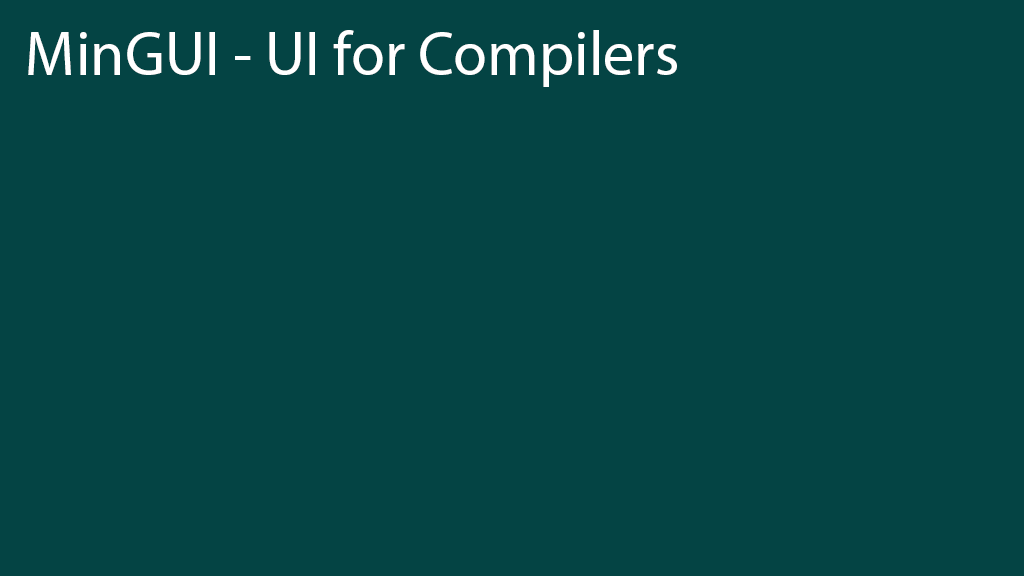
<style>
.page{position:relative;width:1024px;height:576px;background:#044444}
.page>*{position:absolute;margin:0}
.t1{font:62px "MyriadPro-Regular";color:#ffffff}
</style>
<div class="page">
<p class="t1" style="left:28px;top:30px;width:649px;height:57px">MinGUI - UI for Compilers</p>
</div>
